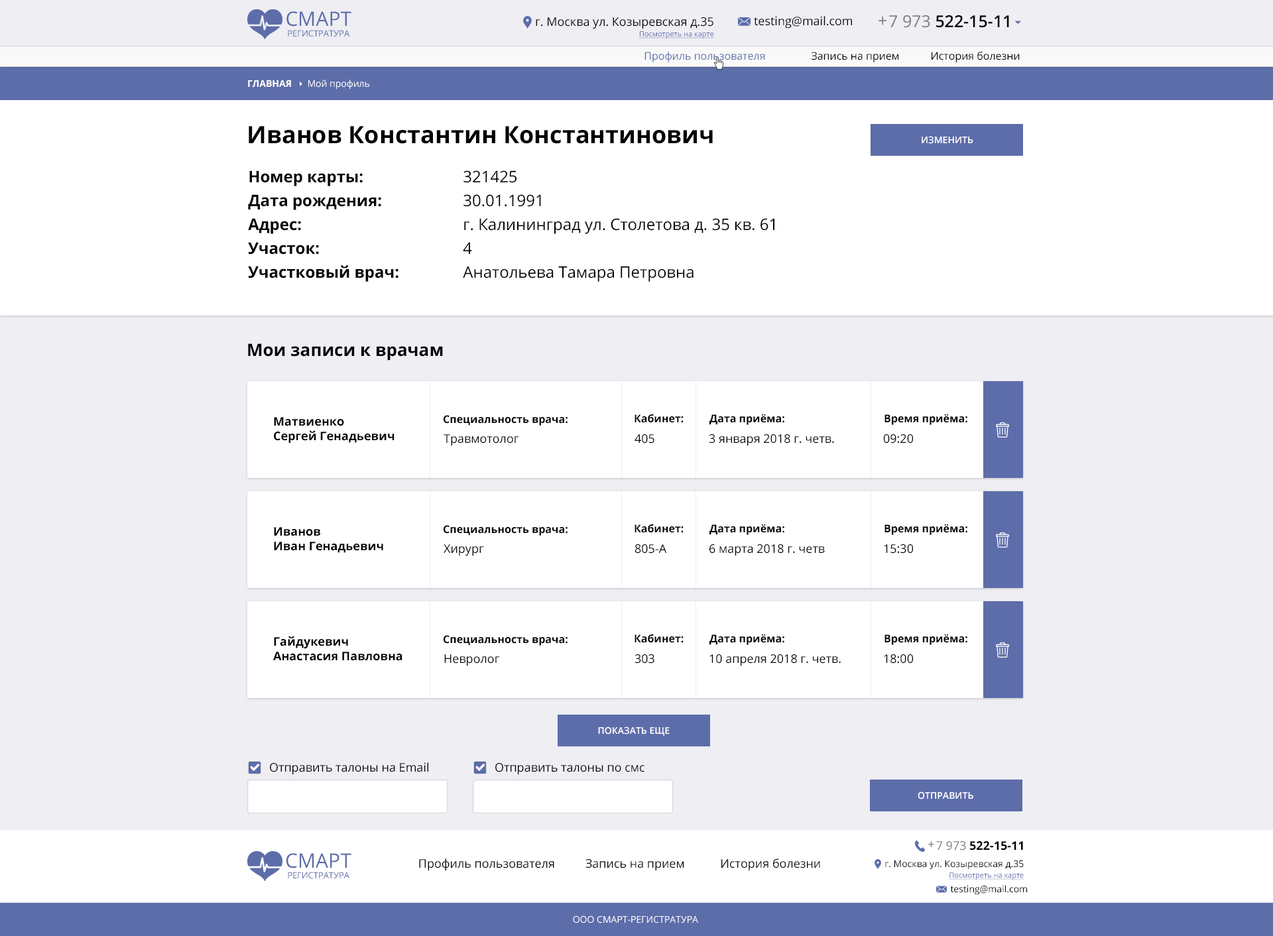
<style>
.page{position:relative;width:1273px;height:936px;background:#ffffff}
.page>*{position:absolute;margin:0}
.t1{font:8.6px/10.6px "OpenSans";letter-spacing:-0.005em;color:#5d6daa}
.t2{font:19.9px/10.6px "OpenSans";color:#5d6daa}
.t3{font:11.9px/9.3px "OpenSans";color:#000000}
.t4{font:7.3px/10.6px "OpenSans";color:#5d6daa;text-decoration:underline}
.t5{font:11.9px "OpenSans";color:#000000}
.t6{font:16.6px "OpenSans";color:#7b7b81}
.t7{font:16.6px "OpenSans-Semibold";color:#000000}
.t8{font:16.6px "OpenSans";color:#000000}
.t9{font:10.6px "OpenSans";color:#000000}
.t10{font:10.6px "OpenSans";color:#5d6daa}
.t11{font:9.3px "OpenSans";color:#ffffff}
.t12{font:9.3px "OpenSans-Bold";color:#ffffff}
.t13{font:23.9px "OpenSans-Bold";color:#000000}
.t14{font:9.3px "OpenSans-Semibold";color:#ffffff;text-transform:uppercase}
.t15{font:15.9px/23.9px "OpenSans";color:#000000}
.t16{font:15.9px/23.9px "OpenSans-Bold";color:#000000}
.t17{font:17.2px "OpenSans-Bold";color:#000000}
.t18{font:10.6px "OpenSans-Bold";color:#000000}
.t19{font:11.9px "OpenSans-Bold";color:#000000}
.t20{font:11.9px "OpenSans";color:#7b7b81}
.t21{font:9.3px/9.3px "OpenSans";color:#000000}
.t22{font:9.3px "OpenSans";color:#000000}
</style>
<div class="page">
<p class="t1" style="left:287px;top:11px;width:64px;height:25px;text-align:center"><span class="t2">CМАРТ<br></span>РЕГИСТРАТУРА</p>
<p class="t3" style="left:536px;top:17px;width:178px;height:21px;text-align:right">г. Москва ул. Козыревская д.35<br><span class="t4">Посмотреть на карте</span></p>
<p class="t5" style="left:754px;top:16px;width:98px;height:13px">testing@mail.com</p>
<p class="t6" style="left:879px;top:17px;width:8px;height:8px">+</p>
<p class="t7" style="left:889px;top:15px;width:120px;height:13px"><span class="t8">  </span><span class="t6">7 973 </span>522-15-11</p>
<p class="t9" style="left:645px;top:51px;width:375px;height:11px"><span class="t10">Профиль пользователя</span>  Запись на прием  История болезни</p>
<p class="t11" style="left:248px;top:80px;width:121px;height:10px"><span class="t12">ГЛАВНАЯ      </span>Мой профиль</p>
<p class="t13" style="left:249px;top:126px;width:464px;height:18px">Иванов Константин Константинович</p>
<p class="t14" style="left:922px;top:136px;width:52px;height:8px">ИЗМЕНИТЬ</p>
<p class="t15" style="left:248px;top:170px;width:527px;height:112px"><span class="t16">Номер карты:</span>     321425<br><span class="t16">Дата рождения:</span>    30.01.1991<br><span class="t16">Адрес: </span>      г. Калининград ул. Столетова д. 35 кв. 61<br><span class="t16">Участок: </span>      4<br><span class="t16">Участковый врач: </span>  Анатольева Тамара Петровна</p>
<p class="t17" style="left:248px;top:344px;width:195px;height:17px">Мои записи к врачам</p>
<p class="t18" style="left:635px;top:414px;width:49px;height:9px">Кабинет:</p>
<p class="t19" style="left:274px;top:417px;width:121px;height:27px">Матвиенко<br>Сергей Генадьевич</p>
<p class="t18" style="left:444px;top:415px;width:124px;height:11px">Специальность врача:</p>
<p class="t18" style="left:710px;top:415px;width:75px;height:10px">Дата приёма:</p>
<p class="t18" style="left:885px;top:415px;width:83px;height:10px">Время приёма:</p>
<p class="t5" style="left:444px;top:434px;width:75px;height:12px">Травмотолог</p>
<p class="t5" style="left:635px;top:434px;width:20px;height:10px">405</p>
<p class="t5" style="left:709px;top:434px;width:125px;height:12px">3 января 2018 г. четв.</p>
<p class="t5" style="left:884px;top:434px;width:29px;height:10px">09:20</p>
<p class="t19" style="left:274px;top:527px;width:109px;height:26px">Иванов<br>Иван Генадьевич</p>
<p class="t18" style="left:444px;top:525px;width:124px;height:11px">Специальность врача:</p>
<p class="t18" style="left:635px;top:524px;width:49px;height:9px">Кабинет:</p>
<p class="t18" style="left:710px;top:525px;width:75px;height:10px">Дата приёма:</p>
<p class="t18" style="left:885px;top:525px;width:83px;height:10px">Время приёма:</p>
<p class="t5" style="left:444px;top:544px;width:40px;height:12px">Хирург</p>
<p class="t5" style="left:635px;top:544px;width:32px;height:10px">805-А</p>
<p class="t5" style="left:710px;top:544px;width:115px;height:12px">6 марта 2018 г. четв</p>
<p class="t5" style="left:884px;top:544px;width:29px;height:10px">15:30</p>
<p class="t19" style="left:273px;top:636px;width:130px;height:25px">Гайдукевич<br>Анастасия Павловна</p>
<p class="t18" style="left:444px;top:635px;width:124px;height:11px">Специальность врача:</p>
<p class="t18" style="left:635px;top:634px;width:49px;height:9px">Кабинет:</p>
<p class="t18" style="left:710px;top:635px;width:75px;height:10px">Дата приёма:</p>
<p class="t18" style="left:885px;top:635px;width:83px;height:10px">Время приёма:</p>
<p class="t5" style="left:444px;top:655px;width:56px;height:12px">Невролог</p>
<p class="t5" style="left:635px;top:655px;width:20px;height:9px">303</p>
<p class="t5" style="left:710px;top:655px;width:131px;height:12px">10 апреля 2018 г. четв.</p>
<p class="t5" style="left:884px;top:655px;width:29px;height:9px">18:00</p>
<p class="t14" style="left:598px;top:727px;width:72px;height:9px">ПОКАЗАТЬ ЕЩЕ</p>
<p class="t5" style="left:270px;top:763px;width:158px;height:12px">Отправить талоны на Email</p>
<p class="t5" style="left:495px;top:763px;width:150px;height:12px">Отправить талоны по смс</p>
<p class="t14" style="left:918px;top:792px;width:56px;height:8px">ОТПРАВИТЬ</p>
<p class="t20" style="left:928px;top:842px;width:6px;height:6px">+</p>
<p class="t19" style="left:936px;top:842px;width:87px;height:9px"><span class="t5">  </span><span class="t20">7 973 </span>522-15-11</p>
<p class="t1" style="left:286px;top:854px;width:65px;height:25px;text-align:center"><span class="t2">CМАРТ<br></span>РЕГИСТРАТУРА</p>
<p class="t5" style="left:419px;top:859px;width:401px;height:12px">Профиль пользователя  Запись на прием      История болезни</p>
<p class="t21" style="left:885px;top:860px;width:140px;height:20px;text-align:right">г. Москва ул. Козыревская д.35<br><span class="t4">Посмотреть на карте</span></p>
<p class="t22" style="left:950px;top:885px;width:77px;height:10px">testing@mail.com</p>
<p class="t11" style="left:573px;top:916px;width:125px;height:8px">ООО СМАРТ-РЕГИСТРАТУРА</p>
</div>
